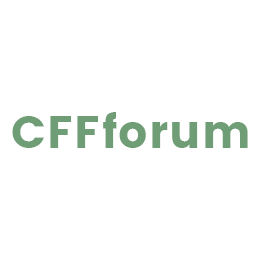
<style>
.page{position:relative;width:260px;height:260px;background:#ffffff}
.page>*{position:absolute;margin:0}
.t1{font:45px "Poppins";letter-spacing:0.03em;color:#6f9e76}
</style>
<div class="page">
<p class="t1" style="left:12px;top:112px;width:236px;height:36px">CFFforum</p>
</div>
